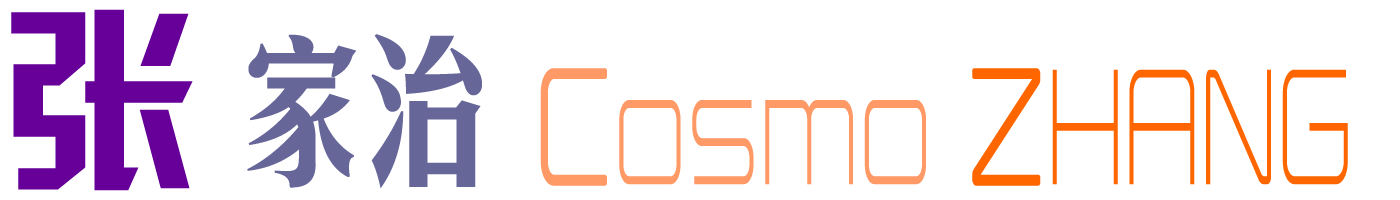
<style>
.page{position:relative;width:1400px;height:200px;background:#ffffff}
.page>*{position:absolute;margin:0}
.t1{font:160px "FZMHJW--GB1-0";letter-spacing:-0.2em;color:#666699}
.t2{font:200px "HYk2gj";letter-spacing:-0.01em;color:#660099}
.t3{font:160px "Expansiva";color:#ff9966;scale:0.5 1}
.t4{font:160px "Expansiva";color:#ff9966;font-weight:bold;scale:0.5 1}
.t5{font:160px "Expansiva";color:#ff6600;font-weight:bold;scale:0.5 1}
.t6{font:160px "Expansiva";color:#ff6600;scale:0.5 1}
</style>
<div class="page">
<p class="t1" style="left:11px;top:9px;width:471px;height:182px"><span class="t2">张  </span>家治</p>
<p class="t3" style="left:540px;top:68px;width:808px;height:118px"><span class="t4">C</span>osmo <span class="t5">Z</span><span class="t6">HANG</span></p>
</div>
